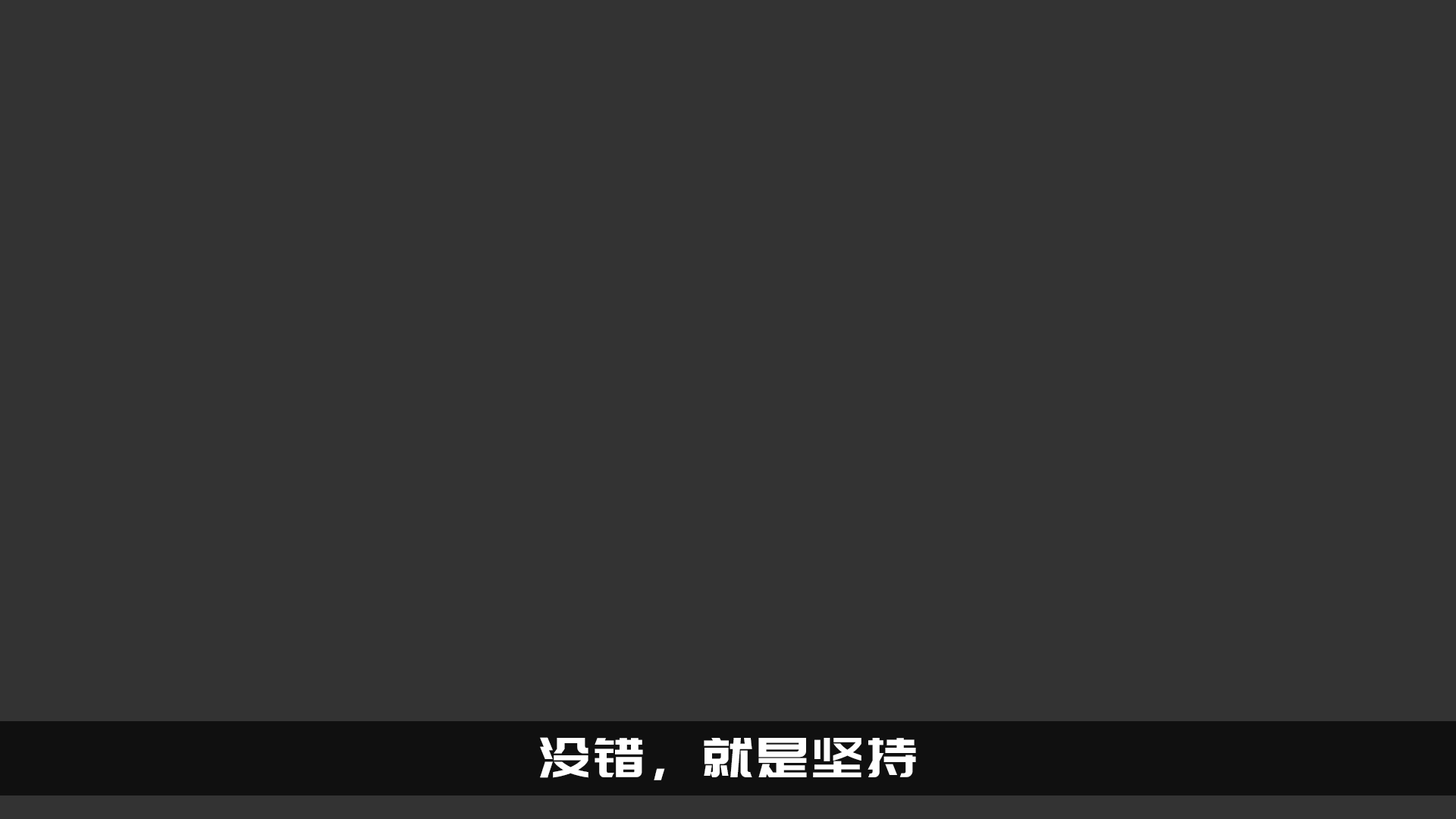
<style>
.page{position:relative;width:1456px;height:819px;background:#333333}
.page>*{position:absolute;margin:0}
.t1{font:54.6px "PangMenZhengDao-3";color:#ffffff}
</style>
<div class="page">
<p class="t1" style="left:540px;top:737px;width:376px;height:43px">没错，就是坚持</p>
</div>
